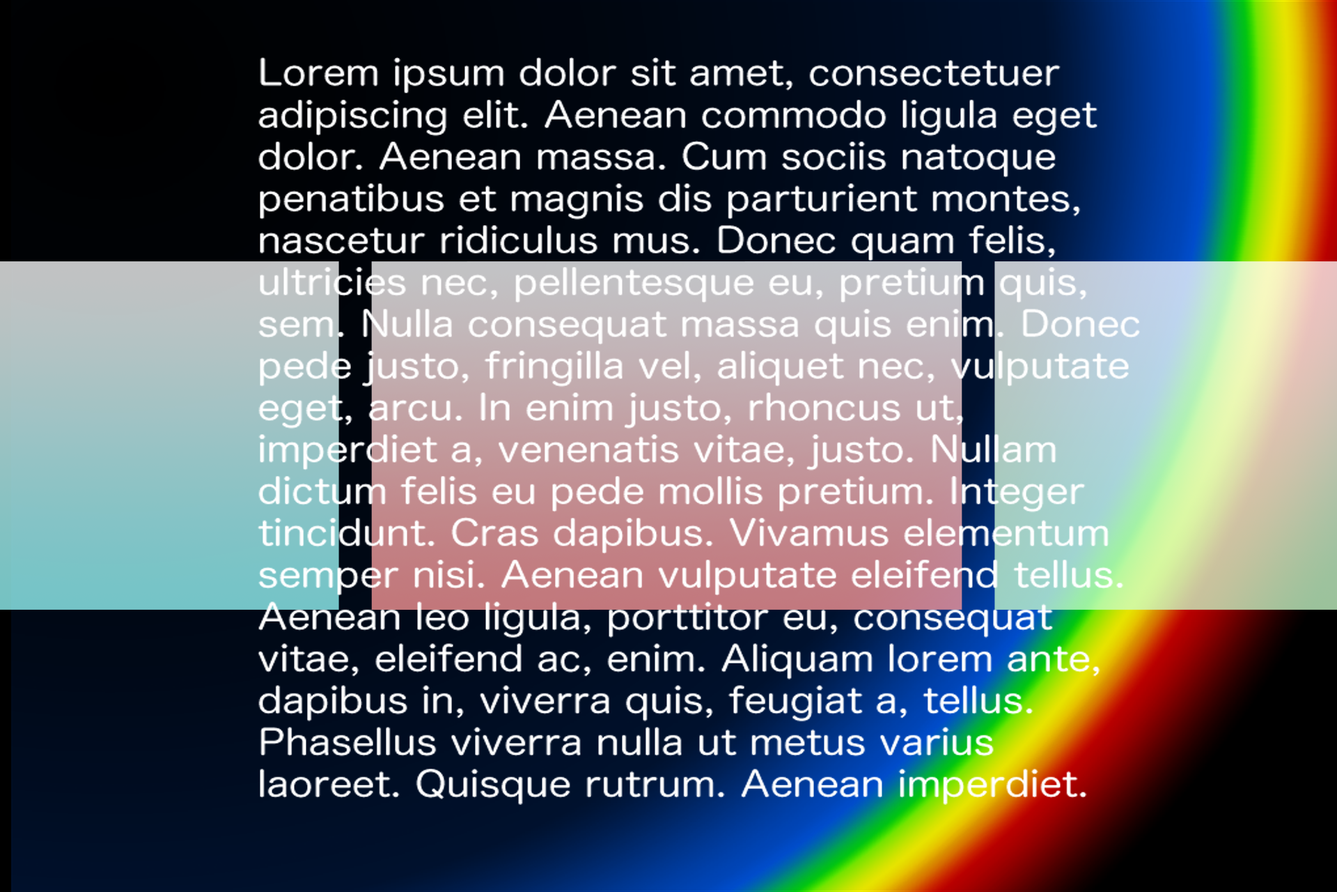
<style>
.page{position:relative;width:1337px;height:892px}
.page>*{position:absolute;margin:0}
.t1{font:34.8px "HiraMaruProN-W4";color:#ffffff;scale:1.13 1}
</style>
<div class="page">
<p class="t1" style="left:258px;top:57px;width:882px;height:748px">Lorem ipsum dolor sit amet, consectetuer adipiscing elit. Aenean commodo ligula eget dolor. Aenean massa. Cum sociis natoque penatibus et magnis dis parturient montes, nascetur ridiculus mus. Donec quam felis, ultricies nec, pellentesque eu, pretium quis, sem. Nulla consequat massa quis enim. Donec pede justo, fringilla vel, aliquet nec, vulputate eget, arcu. In enim justo, rhoncus ut, imperdiet a, venenatis vitae, justo. Nullam dictum felis eu pede mollis pretium. Integer tincidunt. Cras dapibus. Vivamus elementum semper nisi. Aenean vulputate eleifend tellus. Aenean leo ligula, porttitor eu, consequat vitae, eleifend ac, enim. Aliquam lorem ante, dapibus in, viverra quis, feugiat a, tellus. Phasellus viverra nulla ut metus varius laoreet. Quisque rutrum. Aenean imperdiet. Etiam ultricies nisi vel augue. Curabitur ullamcorper ultricies nisi. Nam eget dui. Etiam rhoncus. Maecenas tempus, tellus eget condimentum rhoncus, sem quam semper libero, sit amet adipiscing sem neque sed ipsum. Nam quam nunc, blandit vel, luctus pulvinar, hendrerit id, lorem. Maecenas nec odio et ante tincidunt tempus. Donec vitae sapien ut libero venenatis faucibus. Nullam quis ante. Etiam sit amet orci eget eros faucibus tincidunt. Duis leo. Sed fringilla mauris sit amet nibh. Donec sodales sagittis magna. Sed consequat, leo eget bibendum sodales, augue velit cursus nunc</p>
</div>
